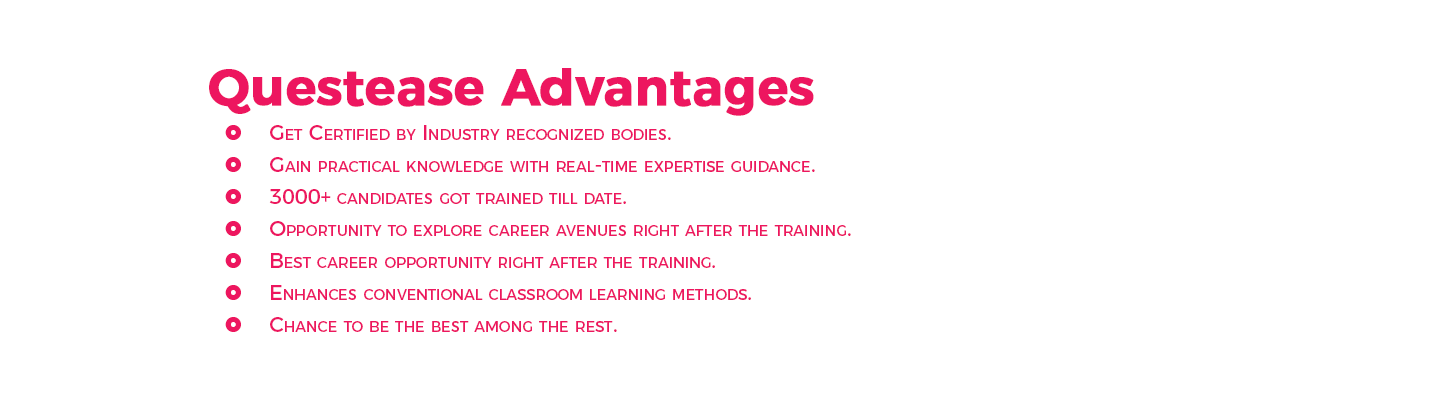
<style>
.page{position:relative;width:1440px;height:400px;background:#ffffff}
.page>*{position:absolute;margin:0}
.t1{font:50.5px "Montserrat-SemiBold";letter-spacing:-0.005em;color:#ed165f;font-weight:bold}
.t2{font:21px/16px "Montserrat-Regular";letter-spacing:-0.005em;color:#ed165f;font-variant:small-caps}
.t3{font:21px/16px "Wingdings2";letter-spacing:-0.005em;color:#ed165f;font-variant:small-caps}
</style>
<div class="page">
<p class="t1" style="left:209px;top:68px;width:605px;height:48px">Questease Advantages</p>
<p class="t2" style="left:225px;top:125px;width:626px;height:207px"><span class="t3"> </span>Get Certified by Industry recognized bodies.<br><br><span class="t3"> </span>Gain practical knowledge with real-time expertise guidance.<br><br><span class="t3"> </span>3000+ candidates got trained till date.<br><br><span class="t3"> </span>Opportunity to explore career avenues right after the training.<br><br><span class="t3"> </span>Best career opportunity right after the training.<br><br><span class="t3"> </span>Enhances conventional classroom learning methods.<br><br><span class="t3"> </span>Chance to be the best among the rest.</p>
</div>
